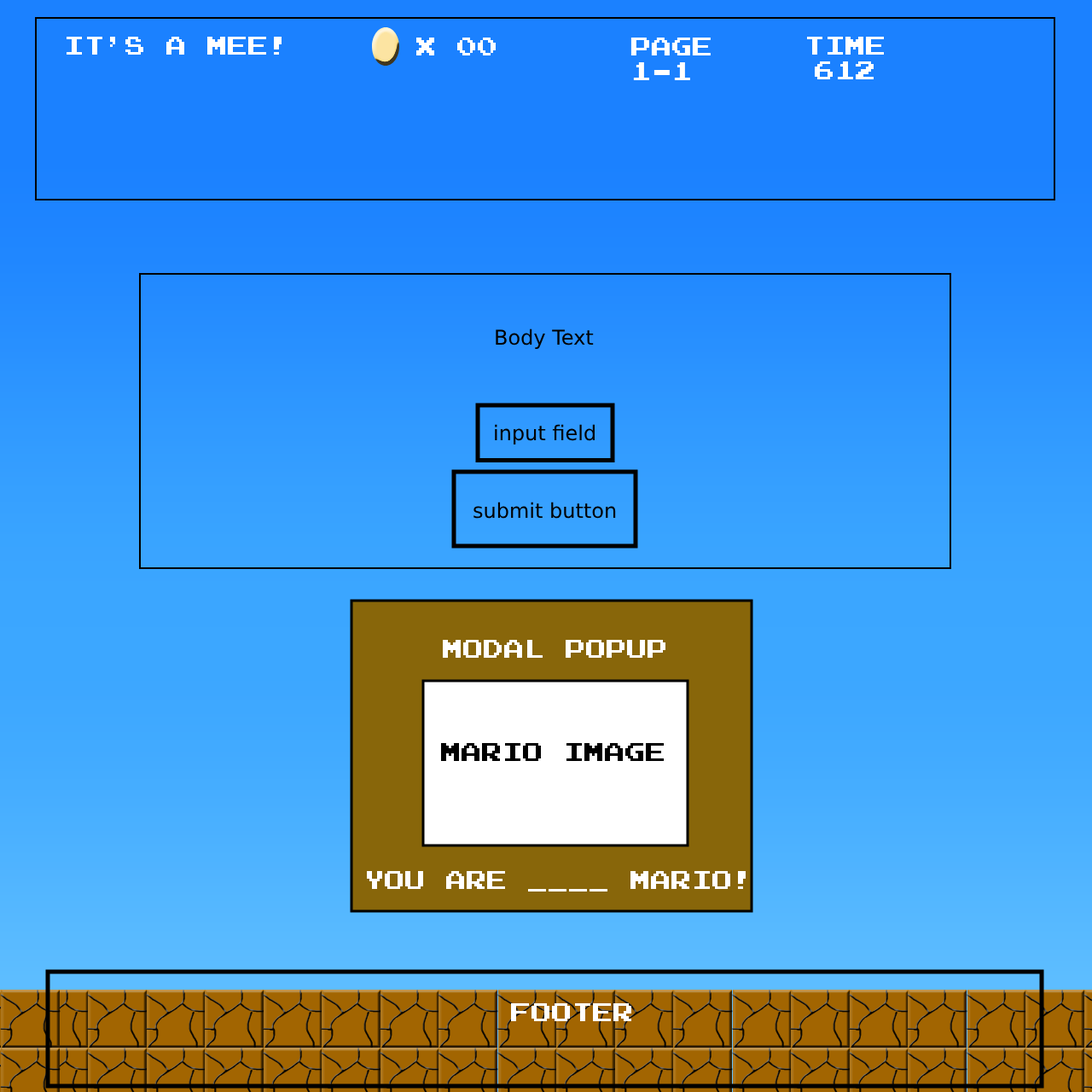
<style>
.page{position:relative;width:1092px;height:1092px}
.page>*{position:absolute;margin:0}
.t1{font:20.5px "SuperMarioBros.NES";color:#ffffff}
.t2{font:20.5px "DejaVuSans";color:#000000}
.t3{font:20.5px "SuperMarioBros.NES";color:#000000}
</style>
<div class="page">
<p class="t1" style="left:67px;top:37px;width:215px;height:18px">It's a Mee!</p>
<p class="t1" style="left:416px;top:38px;width:80px;height:17px">x 00</p>
<p class="t1" style="left:630px;top:38px;width:81px;height:42px">Page<br>1-1</p>
<p class="t1" style="left:807px;top:37px;width:77px;height:42px;text-align:center">Time<br>612</p>
<p class="t2" style="left:496px;top:328px;width:98px;height:21px">Body Text</p>
<p class="t2" style="left:495px;top:424px;width:100px;height:20px">input field</p>
<p class="t2" style="left:473px;top:502px;width:143px;height:17px">submit button</p>
<p class="t1" style="left:443px;top:640px;width:222px;height:18px">Modal Popup</p>
<p class="t3" style="left:441px;top:743px;width:223px;height:18px">Mario Image</p>
<p class="t1" style="left:367px;top:871px;width:379px;height:21px">You are ____ Mario!</p>
<p class="t1" style="left:511px;top:1003px;width:121px;height:18px">Footer</p>
</div>
